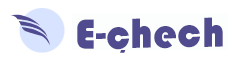
<style>
.page{position:relative;width:246px;height:59px;background:#ffffff}
.page>*{position:absolute;margin:0}
.t1{font:43.8px "Bauhaus93";color:#504b8e}
</style>
<div class="page">
<p class="t1" style="left:77px;top:17px;width:146px;height:33px;rotate:-1deg">E-chech</p>
</div>
